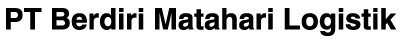
<style>
.page{position:relative;width:400px;height:43px;background:#ffffff}
.page>*{position:absolute;margin:0}
.t1{font:29.6px "Helvetica-Bold";color:#000000}
</style>
<div class="page">
<p class="t1" style="left:6px;top:8px;width:390px;height:28px">PT Berdiri Matahari Logistik</p>
</div>
